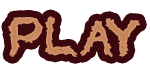
<style>
.page{position:relative;width:150px;height:74px;background:#ffffff}
.page>*{position:absolute;margin:0}
.t1{font:54px "TOBACCO";color:#c4845a;font-weight:bold}
</style>
<div class="page">
<p class="t1" style="left:8px;top:16px;width:132px;height:41px">PLAY</p>
</div>
